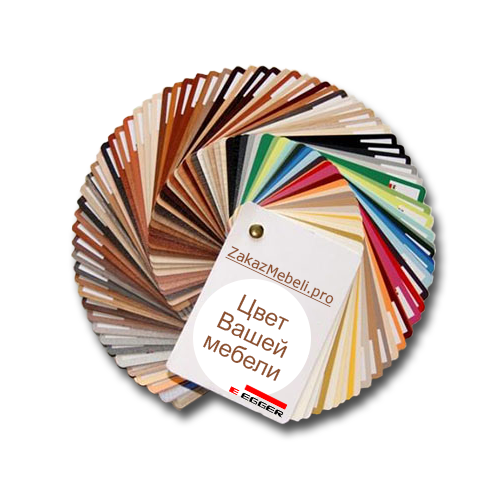
<style>
.page{position:relative;width:500px;height:500px;background:#ffffff}
.page>*{position:absolute;margin:0}
.t1{font:24px/24px "ArialMT";color:#8e5230}
.t2{font:14.1px "Verdana";color:#8e5230;text-decoration:underline}
</style>
<div class="page">
<p class="t1" style="left:203px;top:246px;width:131px;height:135px;text-align:center;rotate:25deg"><span class="t2">ZakazMebeli.pro<br><br></span>Цвет<br>Вашей<br>мебели</p>
</div>
